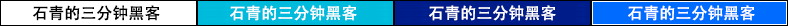
<style>
.page{position:relative;width:788px;height:26px;background:#ffffff}
.page>*{position:absolute;margin:0}
.t1{font:16px "AdobeHeitiStd-Regular";color:#000000}
.t2{font:16px "AdobeHeitiStd-Regular";color:#ffffff}
</style>
<div class="page">
<p class="t1" style="left:33px;top:5px;width:127px;height:16px">石青的三分钟黑客</p>
<p class="t2" style="left:230px;top:5px;width:127px;height:16px">石青的三分钟黑客</p>
<p class="t2" style="left:429px;top:5px;width:127px;height:16px">石青的三分钟黑客</p>
<p class="t2" style="left:628px;top:5px;width:127px;height:16px">石青的三分钟黑客</p>
</div>
